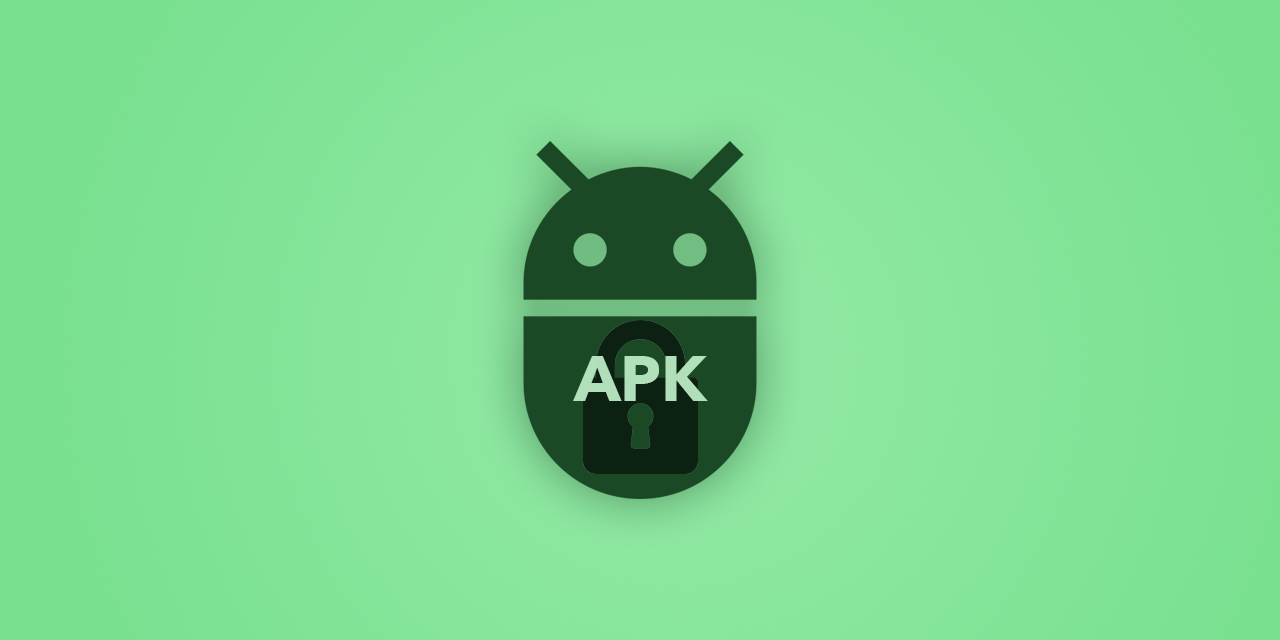
<style>
.page{position:relative;width:1280px;height:640px}
.page>*{position:absolute;margin:0}
.t1{font:64px "AvenirNext-Bold";color:#bcedc6}
</style>
<div class="page">
<p class="t1" style="left:573px;top:356px;width:135px;height:45px;opacity:0.9">APK</p>
</div>
